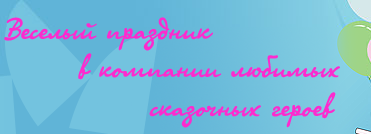
<style>
.page{position:relative;width:371px;height:134px;background:#73c3df}
.page>*{position:absolute;margin:0}
.t1{font:32px "OlgaCTT";color:#fc2bce}
</style>
<div class="page">
<p class="t1" style="left:4px;top:17px;width:336px;height:111px">Веселый праздник<br>  в компании любимых <br>    сказочных героев</p>
</div>
